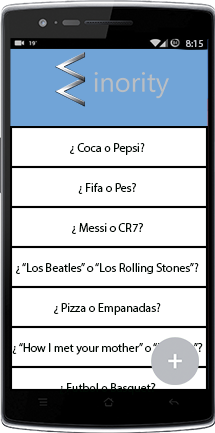
<style>
.page{position:relative;width:215px;height:433px;background:#ffffff}
.page>*{position:absolute;margin:0}
.t1{font:10px "MyriadPro-Regular";color:#c4c5cb}
.t2{font:12px "MyriadPro-Regular";color:#000903}
</style>
<div class="page">
<p class="t1" style="left:186px;top:40px;width:17px;height:7px">8:15</p>
<p class="t2" style="left:70px;top:143px;width:75px;height:12px">¿ Coca o Pepsi?</p>
<p class="t2" style="left:78px;top:183px;width:58px;height:11px">¿ Fifa o Pes?</p>
<p class="t2" style="left:72px;top:223px;width:71px;height:11px">¿ Messi o CR7?</p>
<p class="t2" style="left:16px;top:263px;width:183px;height:11px">¿ “Los Beatles” o “Los Rolling Stones”?</p>
<p class="t2" style="left:54px;top:303px;width:107px;height:12px">¿ Pizza o Empanadas?</p>
<p class="t2" style="left:12px;top:343px;width:191px;height:12px">¿ “How I met your mother” o “Friends”?</p>
<p class="t2" style="left:59px;top:383px;width:97px;height:12px">¿ Futbol o Basquet?</p>
</div>
